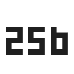
<style>
.page{position:relative;width:74px;height:74px;background:#ffffff}
.page>*{position:absolute;margin:0}
.t1{font:45px "04b24";color:#1f1f1f}
</style>
<div class="page">
<p class="t1" style="left:6px;top:27px;width:62px;height:28px">256</p>
</div>
